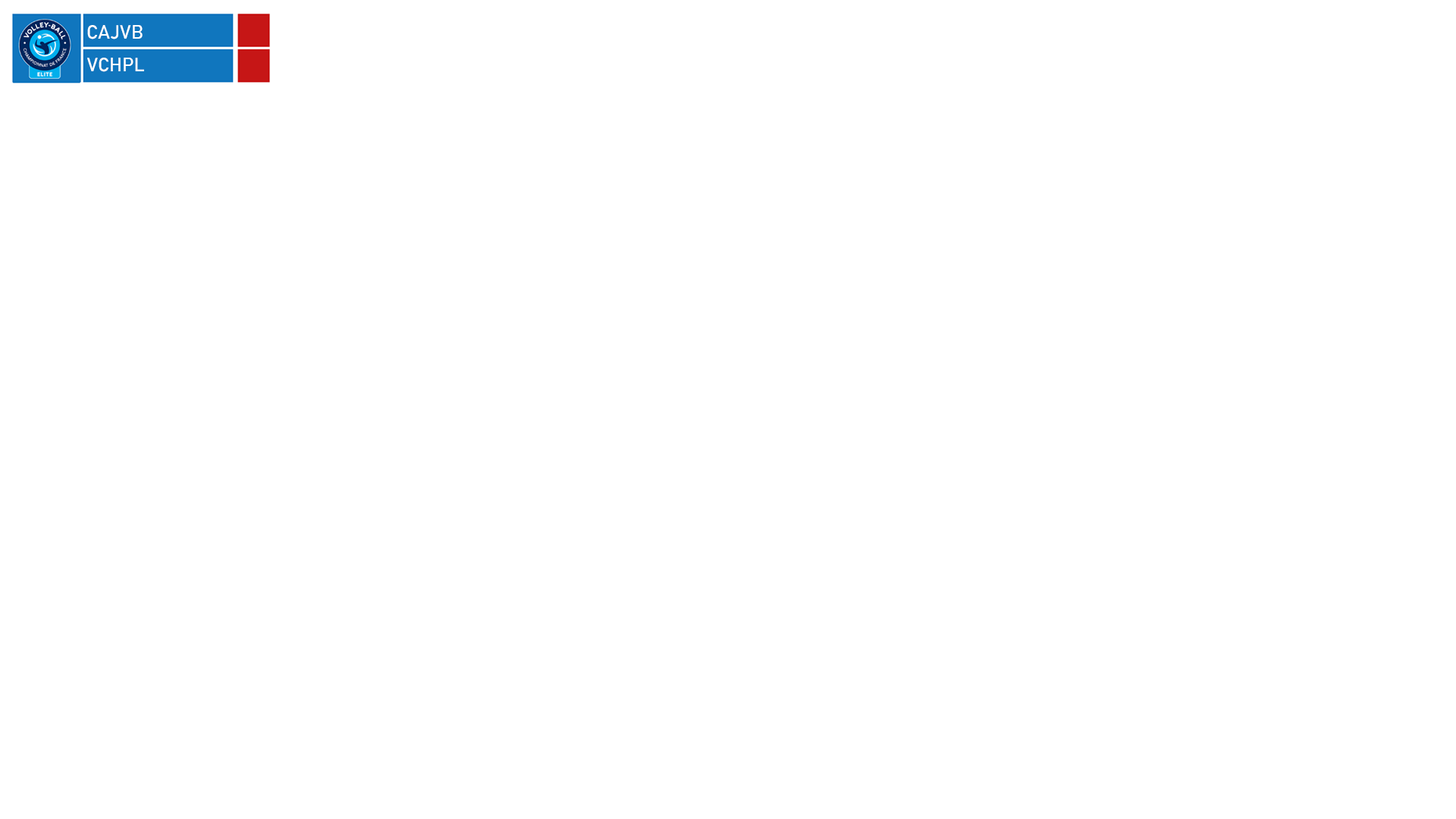
<style>
.page{position:relative;width:1456px;height:819px;background:#ffffff}
.page>*{position:absolute;margin:0}
.t1{font:19px "Bahnschrift";letter-spacing:0.002em;color:#ffffff}
</style>
<div class="page">
<p class="t1" style="left:87px;top:25px;width:56px;height:14px">CAJVB</p>
<p class="t1" style="left:87px;top:58px;width:57px;height:14px">VCHPL</p>
</div>
